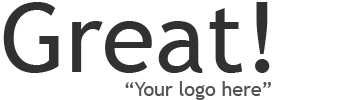
<style>
.page{position:relative;width:350px;height:100px;background:#ffffff}
.page>*{position:absolute;margin:0}
.t1{font:96px "TrebuchetMS";color:#313131}
.t2{font:19.6px "TrebuchetMS";color:#535353}
</style>
<div class="page">
<p class="t1" style="left:3px;top:2px;width:267px;height:71px">Great!</p>
<p class="t2" style="left:125px;top:81px;width:146px;height:19px">“Your logo here”</p>
</div>
